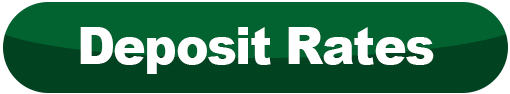
<style>
.page{position:relative;width:510px;height:94px;background:#026330}
.page>*{position:absolute;margin:0}
.t1{font:51.2px "Arial-Black";letter-spacing:-0.025em;color:#ffffff;scale:0.95 1}
</style>
<div class="page">
<p class="t1" style="left:80px;top:27px;width:354px;height:47px">Deposit Rates</p>
</div>
